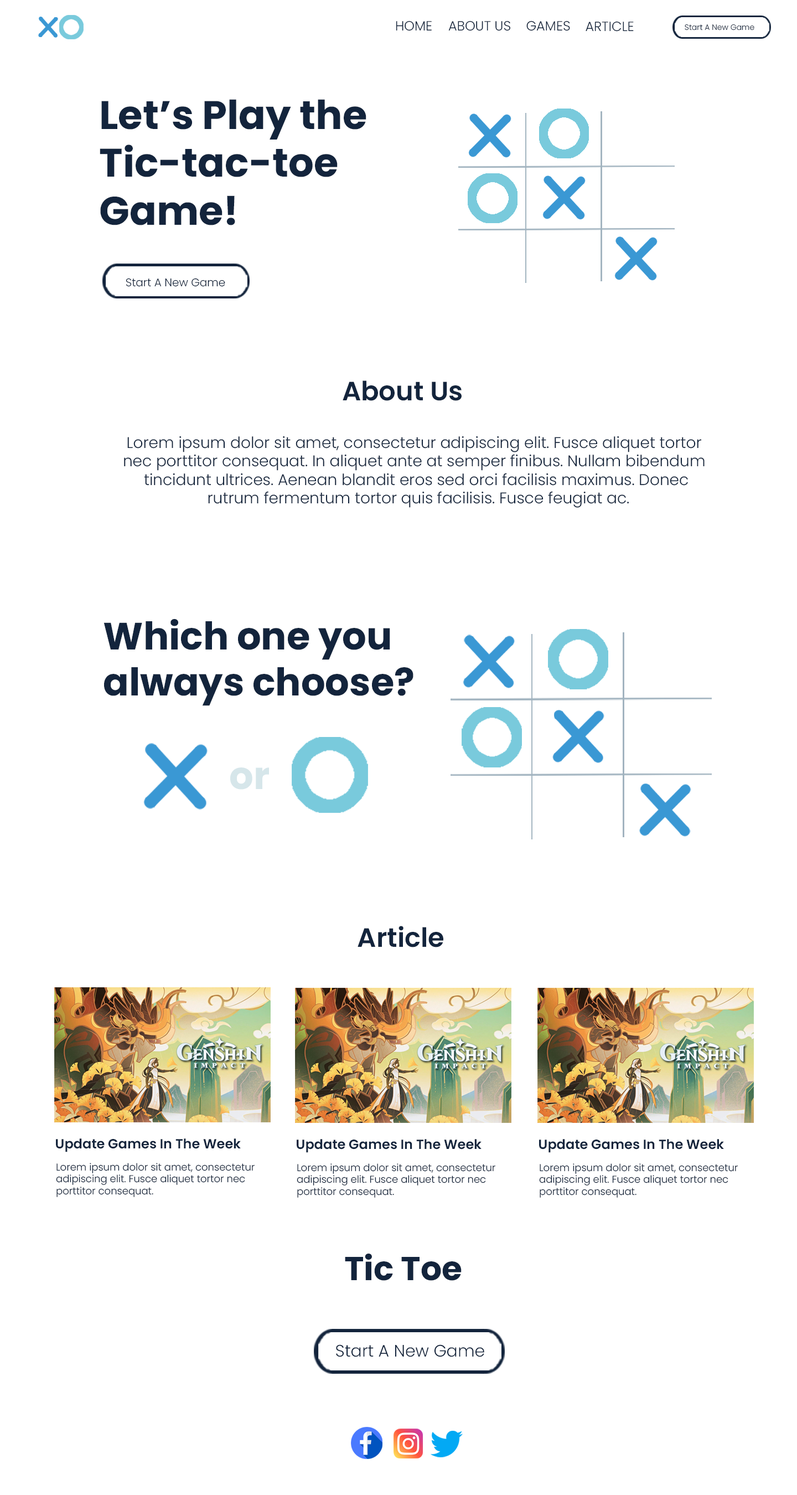
<style>
.page{position:relative;width:797px;height:1495px;background:#ffffff}
.page>*{position:absolute;margin:0}
.t1{font:13.3px "Poppins-Light";color:#13243c}
.t2{font:7.8px "Poppins-Light";color:#13243c}
.t3{font:39.9px "Poppins-Bold";color:#13243c}
.t4{font:11.1px "Poppins-Light";color:#13243c}
.t5{font:26.6px "Poppins-SemiBold";color:#13243c}
.t6{font:15.5px "Poppins-Light";color:#13243c}
.t7{font:38.1px "Poppins-Bold";color:#13243c}
.t8{font:38.1px "Poppins-Bold";color:#d6e6ea}
.t9{font:13.3px "Poppins-SemiBold";color:#13243c}
.t10{font:10px "Poppins-Light";color:#13243c}
.t11{font:33.2px "Poppins-Bold";color:#13243c}
.t12{font:16.6px "Poppins-Light";color:#13243c}
</style>
<div class="page">
<p class="t1" style="left:396px;top:20px;width:36px;height:11px">HOME</p>
<p class="t1" style="left:449px;top:20px;width:62px;height:11px">ABOUT US</p>
<p class="t1" style="left:527px;top:20px;width:43px;height:11px">GAMES</p>
<p class="t1" style="left:586px;top:21px;width:48px;height:11px">ARTICLE</p>
<p class="t2" style="left:685px;top:24px;width:70px;height:6px">Start A New Game</p>
<p class="t3" style="left:100px;top:99px;width:267px;height:126px">Let’s Play the<br>Tic-tac-toe<br>Game!</p>
<p class="t4" style="left:126px;top:278px;width:99px;height:9px">Start A New Game</p>
<p class="t5" style="left:343px;top:380px;width:119px;height:21px">About Us</p>
<p class="t6" style="left:124px;top:436px;width:581px;height:72px;text-align:center">Lorem ipsum dolor sit amet, consectetur adipiscing elit. Fusce aliquet tortor <br>nec porttitor consequat. In aliquet ante at semper finibus. Nullam bibendum <br>tincidunt ultrices. Aenean blandit eros sed orci facilisis maximus. Donec<br> rutrum fermentum tortor quis facilisis. Fusce feugiat ac.</p>
<p class="t7" style="left:104px;top:619px;width:310px;height:87px">Which one you <br>always choose?</p>
<p class="t8" style="left:230px;top:768px;width:39px;height:22px">or</p>
<p class="t5" style="left:358px;top:926px;width:86px;height:22px">Article</p>
<p class="t9" style="left:56px;top:1139px;width:185px;height:13px">Update Games In The Week</p>
<p class="t9" style="left:297px;top:1139px;width:185px;height:14px">Update Games In The Week</p>
<p class="t9" style="left:539px;top:1139px;width:185px;height:14px">Update Games In The Week</p>
<p class="t10" style="left:56px;top:1163px;width:199px;height:34px">Lorem ipsum dolor sit amet, consectetur <br>adipiscing elit. Fusce aliquet tortor nec <br>porttitor consequat.</p>
<p class="t10" style="left:297px;top:1164px;width:199px;height:34px">Lorem ipsum dolor sit amet, consectetur <br>adipiscing elit. Fusce aliquet tortor nec <br>porttitor consequat.</p>
<p class="t10" style="left:539px;top:1164px;width:199px;height:34px">Lorem ipsum dolor sit amet, consectetur <br>adipiscing elit. Fusce aliquet tortor nec <br>porttitor consequat.</p>
<p class="t11" style="left:345px;top:1254px;width:117px;height:27px">Tic Toe</p>
<p class="t12" style="left:336px;top:1345px;width:149px;height:12px">Start A New Game</p>
</div>
